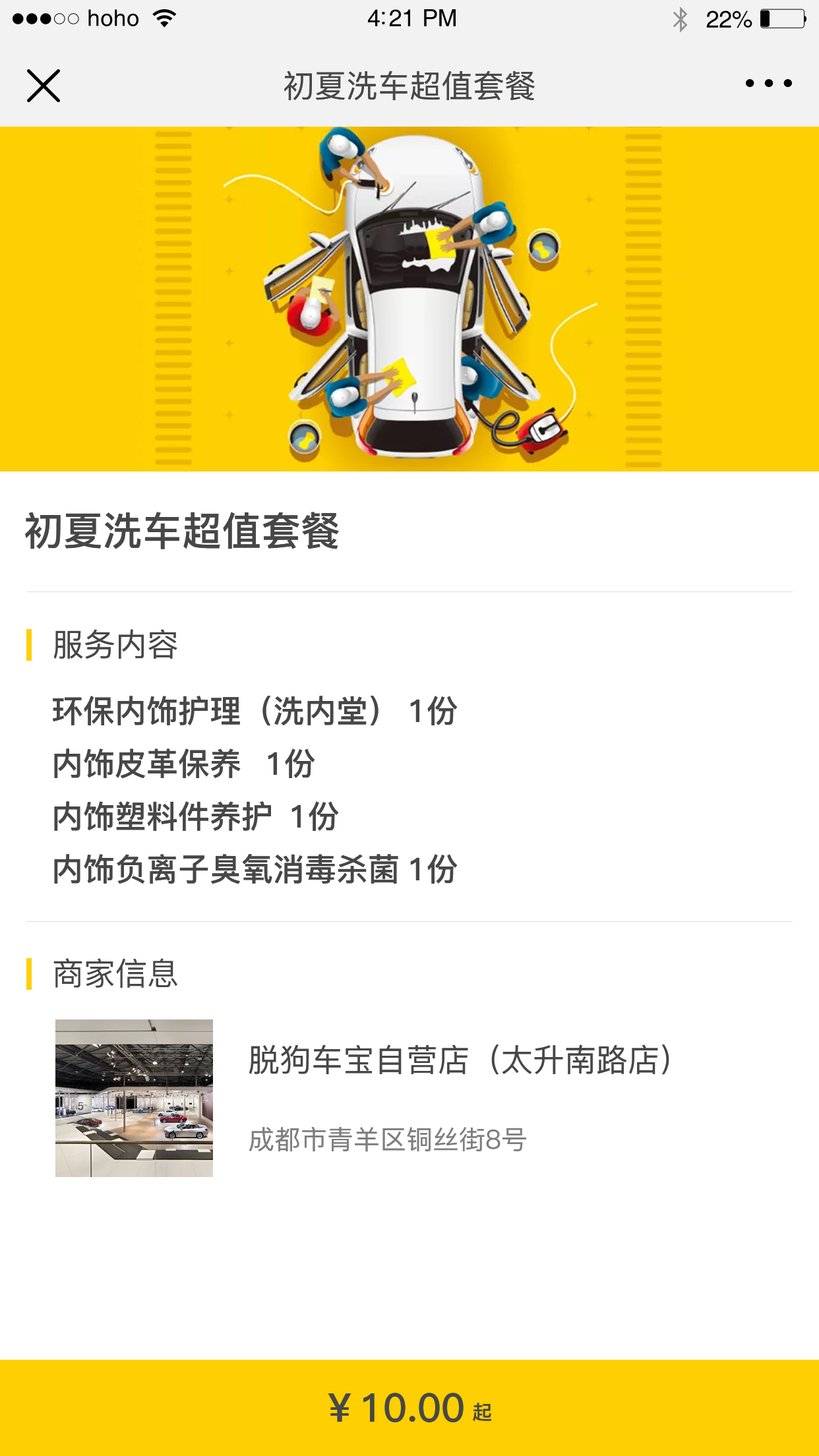
<style>
.page{position:relative;width:819px;height:1456px;background:#ffffff}
.page>*{position:absolute;margin:0}
.t1{font:22.8px "Helvetica";letter-spacing:0.02em;color:#000000}
.t2{font:23.8px "Helvetica";letter-spacing:-0.02em;color:#000000}
.t3{font:31.7px "PingFang-SC-Medium";color:#474747}
.t4{font:39.6px "PingFang-SC-Bold";color:#474747}
.t5{font:31.7px/52.8px "PingFang-SC-Bold";color:#474747}
.t6{font:26.4px "PingFang-SC-Medium";color:#7e7e7e}
.t7{font:19.8px "PingFang-SC-Bold";color:#474747}
</style>
<div class="page">
<p class="t1" style="left:88px;top:9px;width:50px;height:17px">hoho</p>
<p class="t2" style="left:368px;top:9px;width:88px;height:17px">4:21 PM</p>
<p class="t2" style="left:706px;top:11px;width:46px;height:17px">22%</p>
<p class="t3" style="left:284px;top:71px;width:251px;height:29px">初夏洗车超值套餐</p>
<p class="t4" style="left:25px;top:512px;width:314px;height:37px">初夏洗车超值套餐</p>
<p class="t3" style="left:53px;top:629px;width:124px;height:30px">服务内容</p>
<p class="t5" style="left:53px;top:696px;width:405px;height:188px;text-align:justify">环保内饰护理（洗内堂） 1份 <br>内饰皮革保养 1份 <br>内饰塑料件养护 1份 <br>内饰负离子臭氧消毒杀菌 1份</p>
<p class="t3" style="left:53px;top:958px;width:124px;height:30px">商家信息</p>
<p class="t3" style="left:249px;top:1045px;width:420px;height:30px">脱狗车宝自营店（太升南路店）</p>
<p class="t6" style="left:249px;top:1127px;width:277px;height:25px">成都市青羊区铜丝街8号</p>
<p class="t4" style="left:328px;top:1393px;width:136px;height:29px">￥10.00</p>
<p class="t7" style="left:473px;top:1403px;width:19px;height:19px">起</p>
</div>
